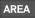
<style>
.page{position:relative;width:35px;height:18px;background:#555555}
.page>*{position:absolute;margin:0}
.t1{font:10.1px "HCRDotum-Bold";color:#ffffff}
</style>
<div class="page">
<p class="t1" style="left:3px;top:5px;width:27px;height:8px">AREA</p>
</div>
